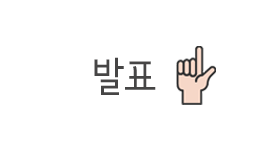
<style>
.page{position:relative;width:280px;height:150px;background:#ffffff}
.page>*{position:absolute;margin:0}
.t1{font:40px "SeN-CM";color:#464545}
</style>
<div class="page">
<p class="t1" style="left:94px;top:57px;width:62px;height:38px">발표</p>
</div>
